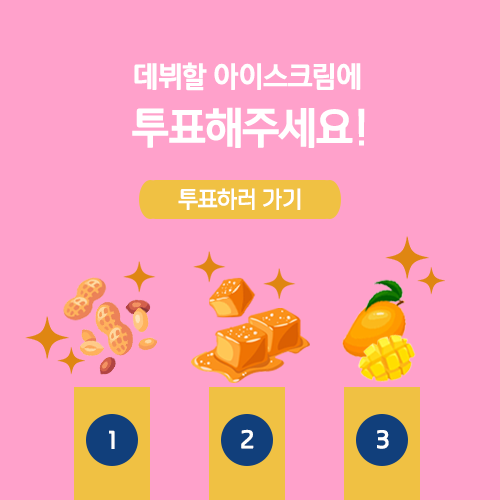
<style>
.page{position:relative;width:500px;height:500px;background:#ffa1cb}
.page>*{position:absolute;margin:0}
.t1{font:27.8px/55.6px "payboocExtraBold";color:#ffffff;scale:0.95 1}
.t2{font:41.7px/55.6px "payboocExtraBold";color:#ffffff;scale:0.95 1}
.t3{font:22.2px "payboocBold";color:#ffffff;scale:0.95 1}
.t4{font:22.2px "payboocExtraBold";color:#fffffe;scale:0.95 1}
</style>
<div class="page">
<p class="t1" style="left:132px;top:62px;width:233px;height:86px;text-align:center">데뷔할 아이스크림에 <br><span class="t2">투표해주세요!</span></p>
<p class="t3" style="left:178px;top:188px;width:123px;height:22px">투표하러 가기</p>
<p class="t4" style="left:109px;top:430px;width:6px;height:19px">1</p>
<p class="t4" style="left:241px;top:429px;width:13px;height:20px">2</p>
<p class="t4" style="left:377px;top:430px;width:12px;height:19px">3</p>
</div>
